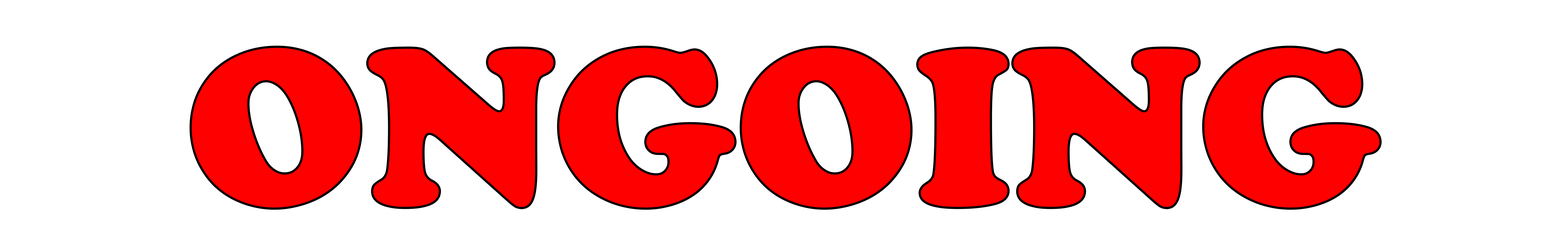
<style>
.page{position:relative;width:1568px;height:243px;background:#ffffff}
.page>*{position:absolute;margin:0}
.t1{font:230px "CooperBlack";color:#ff0000}
</style>
<div class="page">
<p class="t1" style="left:192px;top:48px;width:1188px;height:160px">ONGOING</p>
</div>
